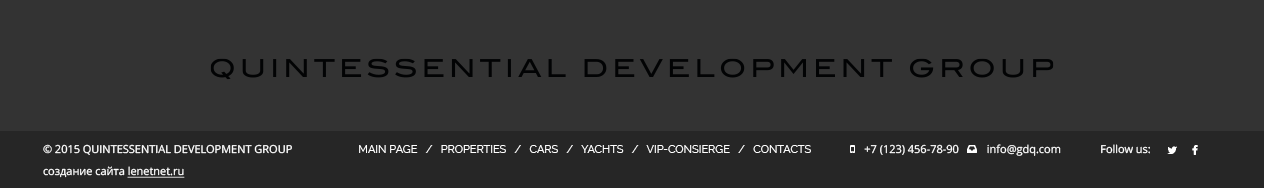
<style>
.page{position:relative;width:1264px;height:188px;background:#333333}
.page>*{position:absolute;margin:0}
.t1{font:11px "OpenSans";color:#ffffff;text-transform:uppercase}
.t2{font:11px "OpenSans";color:#ffffff}
.t3{font:11px "Raleway-Regular";color:#ffffff;text-transform:uppercase}
.t4{font:11px "MyriadPro-Regular";color:#ffffff}
.t5{font:11px "OpenSans";color:#ffffff;text-decoration:underline}
</style>
<div class="page">
<p class="t1" style="left:43px;top:144px;width:249px;height:11px"><span class="t2">© 2015 </span>quintessential development group</p>
<p class="t3" style="left:359px;top:145px;width:452px;height:8px">MAIN PAGE   /   properties   /   CARS   /   YACHTS   /   VIP-CONSIERGE   /   CONTACTS</p>
<p class="t2" style="left:864px;top:144px;width:95px;height:11px">+7 (123) 456-78-90</p>
<p class="t2" style="left:987px;top:144px;width:74px;height:12px"><span class="t4"> </span>info@gdq.com</p>
<p class="t2" style="left:1101px;top:144px;width:49px;height:10px">Follow us:</p>
<p class="t2" style="left:43px;top:166px;width:142px;height:12px">создание сайта <span class="t5">lenetnet.ru</span></p>
</div>
